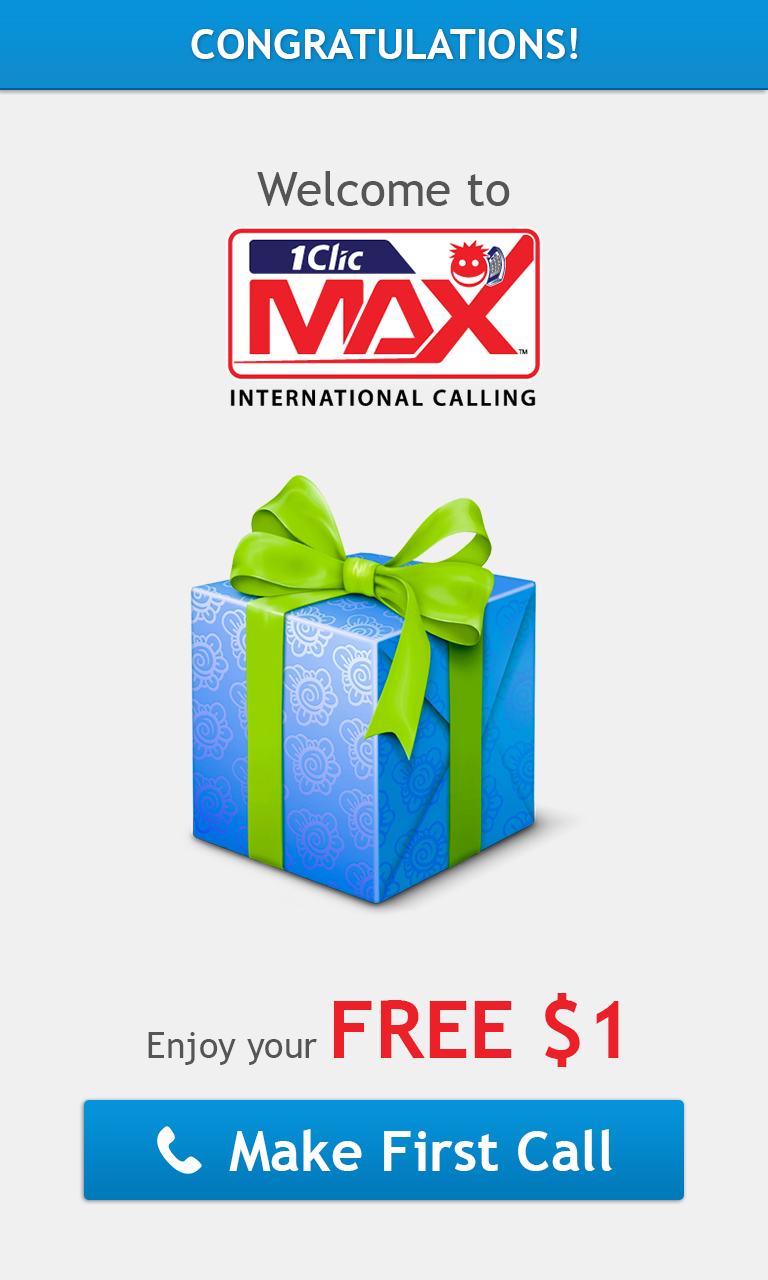
<style>
.page{position:relative;width:768px;height:1280px;background:#f0f0f0}
.page>*{position:absolute;margin:0}
.t1{font:42px "TrebuchetMS-Bold";color:#ffffff}
.t2{font:48px "TrebuchetMS";color:#555555}
.t3{font:36px "TrebuchetMS";color:#555555}
.t4{font:80px "TrebuchetMS-Bold";color:#ec2028}
.t5{font:56px "TrebuchetMS-Bold";color:#ffffff}
</style>
<div class="page">
<p class="t1" style="left:191px;top:28px;width:387px;height:31px">CONGRATULATIONS!</p>
<p class="t2" style="left:257px;top:171px;width:253px;height:35px">Welcome to</p>
<p class="t3" style="left:148px;top:993px;width:471px;height:74px">Enjoy your <span class="t4">FREE $1</span></p>
<p class="t5" style="left:229px;top:1129px;width:383px;height:42px">Make First Call</p>
</div>
